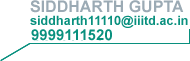
<style>
.page{position:relative;width:190px;height:61px;background:#ffffff}
.page>*{position:absolute;margin:0}
.t1{font:16px "Arial-BoldMT";color:#9baab4}
.t2{font:12.7px "Arial-BoldMT";color:#09907e}
.t3{font:15px "Arial-BoldMT";color:#09907e}
</style>
<div class="page">
<p class="t1" style="left:30px;top:0px;width:154px;height:13px">SIDDHARTH GUPTA</p>
<p class="t2" style="left:30px;top:15px;width:158px;height:13px">siddharth11110@iiitd.ac.in</p>
<p class="t3" style="left:31px;top:29px;width:81px;height:12px">9999111520</p>
</div>
